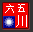
<style>
.page{position:relative;width:33px;height:32px;background:#f20000}
.page>*{position:absolute;margin:0}
.t1{font:10.4px "SimSun";color:#ffffff}
.t2{font:11.7px "SimSun";color:#ffffff}
</style>
<div class="page">
<p class="t1" style="left:5px;top:4px;width:20px;height:9px">六五</p>
<p class="t2" style="left:16px;top:15px;width:11px;height:12px">川</p>
</div>
